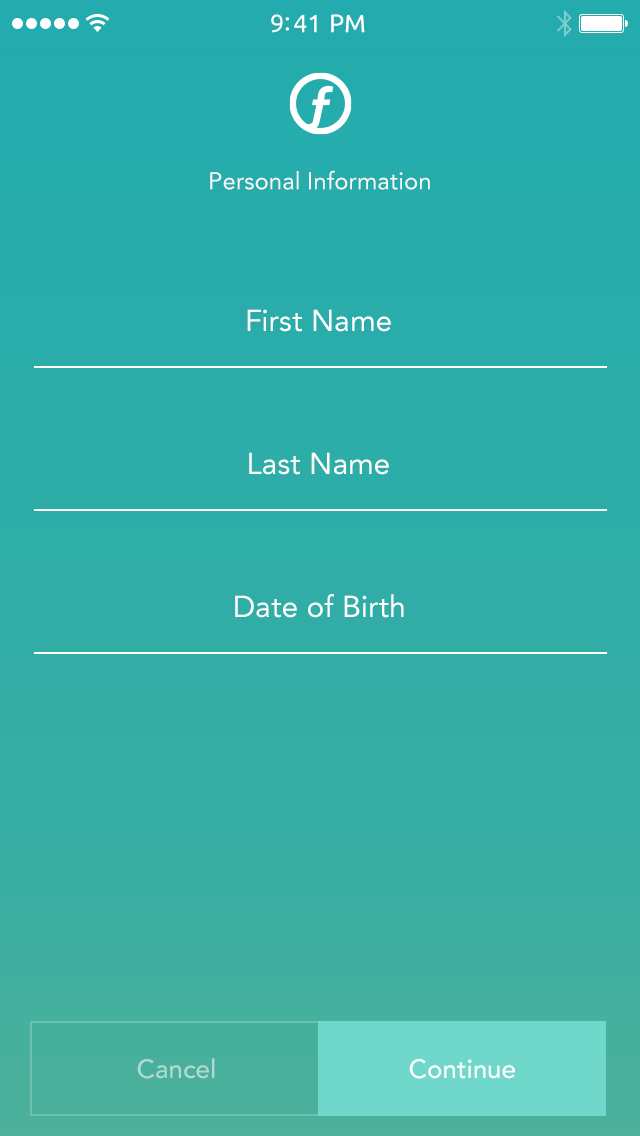
<style>
.page{position:relative;width:640px;height:1136px}
.page>*{position:absolute;margin:0}
.t1{font:25px "Ubuntu";color:#ffffff}
.t2{font:24px "Avenir-Roman";color:#f9f9f9}
.t3{font:30px "Avenir-Roman";color:#ffffff}
.t4{font:26px "Avenir-Medium";color:#b3dad1}
.t5{font:26px "Avenir-Medium";color:#ffffff}
</style>
<div class="page">
<p class="t1" style="left:271px;top:14px;width:94px;height:19px">9:41 PM</p>
<p class="t2" style="left:210px;top:170px;width:220px;height:20px">Personal Information</p>
<p class="t3" style="left:247px;top:309px;width:144px;height:23px">First Name</p>
<p class="t3" style="left:249px;top:452px;width:140px;height:23px">Last Name</p>
<p class="t3" style="left:235px;top:594px;width:169px;height:24px">Date of Birth</p>
<p class="t4" style="left:137px;top:1058px;width:78px;height:21px">Cancel</p>
<p class="t5" style="left:409px;top:1059px;width:106px;height:20px">Continue</p>
</div>
